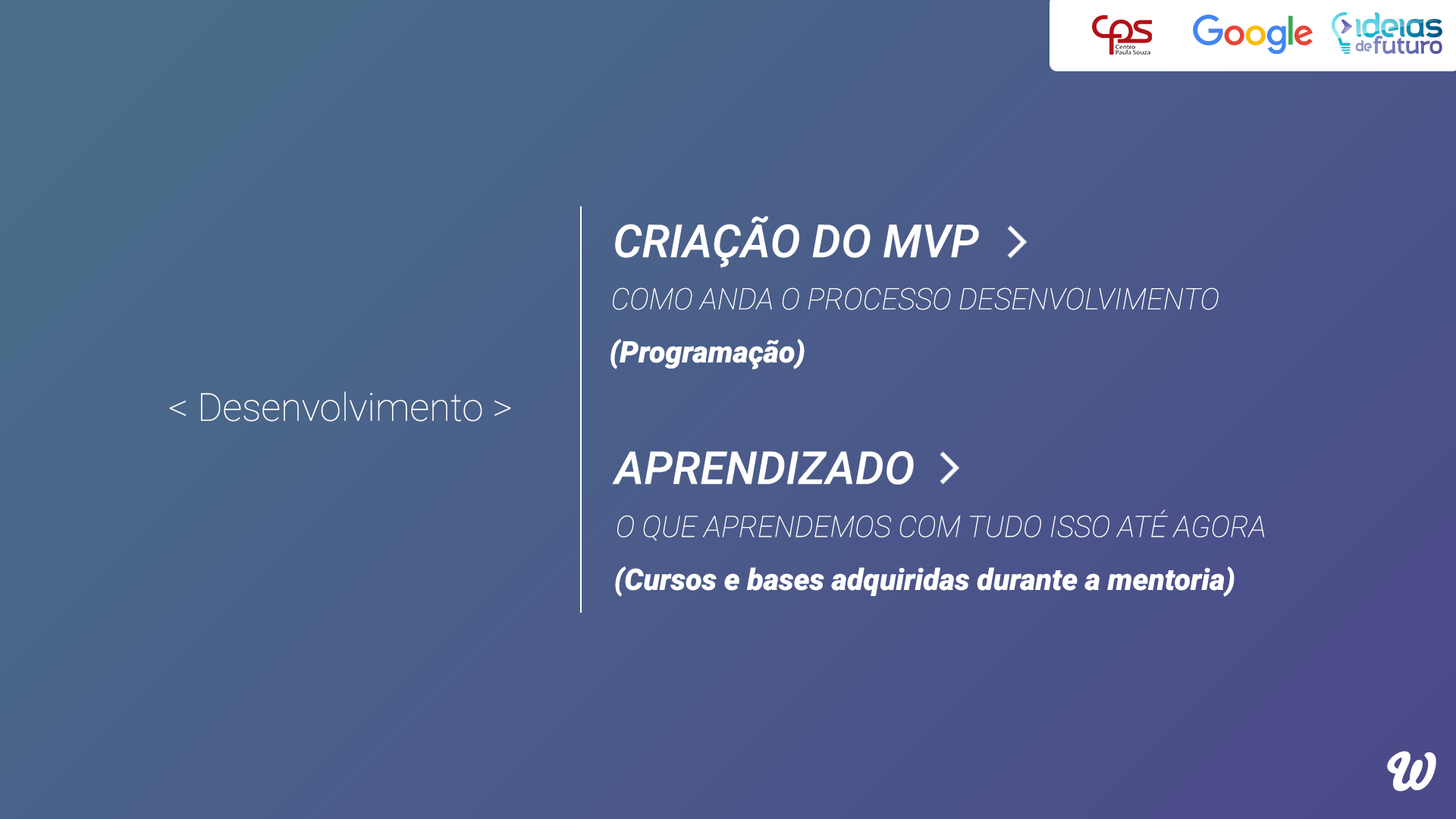
<style>
.page{position:relative;width:1456px;height:819px}
.page>*{position:absolute;margin:0}
.t1{font:45.4px "Roboto-MediumItalic";color:#ffffff}
.t2{font:29.6px "Roboto-ThinItalic";color:#ffffff}
.t3{font:29.6px "Roboto-BlackItalic";color:#ffffff}
.t4{font:38.5px "Roboto-Thin";color:#ffffff}
.t5{font:45.3px "Roboto-MediumItalic";color:#ffffff}
.t6{font:50.8px "Bello-Pro";color:#ffffff}
</style>
<div class="page">
<p class="t1" style="left:615px;top:216px;width:364px;height:52px">CRIAÇÃO DO MVP</p>
<p class="t2" style="left:613px;top:287px;width:606px;height:23px">COMO ANDA O PROCESSO DESENVOLVIMENTO</p>
<p class="t3" style="left:610px;top:339px;width:195px;height:30px">(Programação)</p>
<p class="t4" style="left:169px;top:391px;width:342px;height:31px">&lt; Desenvolvimento &gt;</p>
<p class="t5" style="left:612px;top:451px;width:302px;height:34px">APRENDIZADO</p>
<p class="t2" style="left:617px;top:510px;width:648px;height:31px">O QUE APRENDEMOS COM TUDO ISSO ATÉ AGORA</p>
<p class="t3" style="left:615px;top:566px;width:620px;height:31px">(Cursos e bases adquiridas durante a mentoria)</p>
<p class="t6" style="left:1387px;top:751px;width:49px;height:41px">W</p>
</div>
